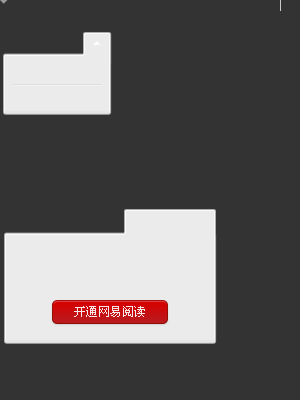
<style>
.page{position:relative;width:300px;height:400px;background:#333333}
.page>*{position:absolute;margin:0}
.t1{font:12px "SimSun";color:#ffffff}
</style>
<div class="page">
<p class="t1" style="left:74px;top:306px;width:71px;height:11px">开通网易阅读</p>
</div>
